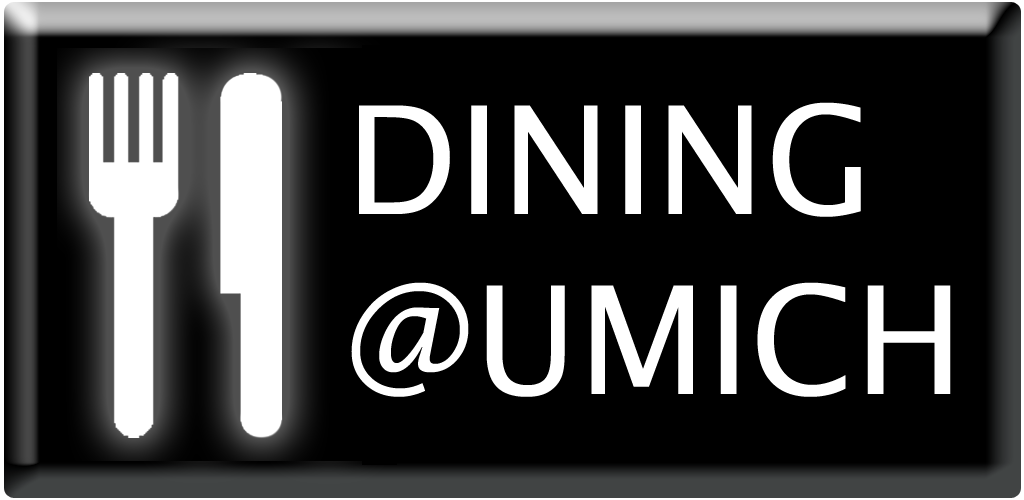
<style>
.page{position:relative;width:1024px;height:500px;background:#000000}
.page>*{position:absolute;margin:0}
.t1{font:150px "LucidaSansUnicode";color:#ffffff}
</style>
<div class="page">
<p class="t1" style="left:351px;top:102px;width:600px;height:295px">DINING<br>@UMICH</p>
</div>
